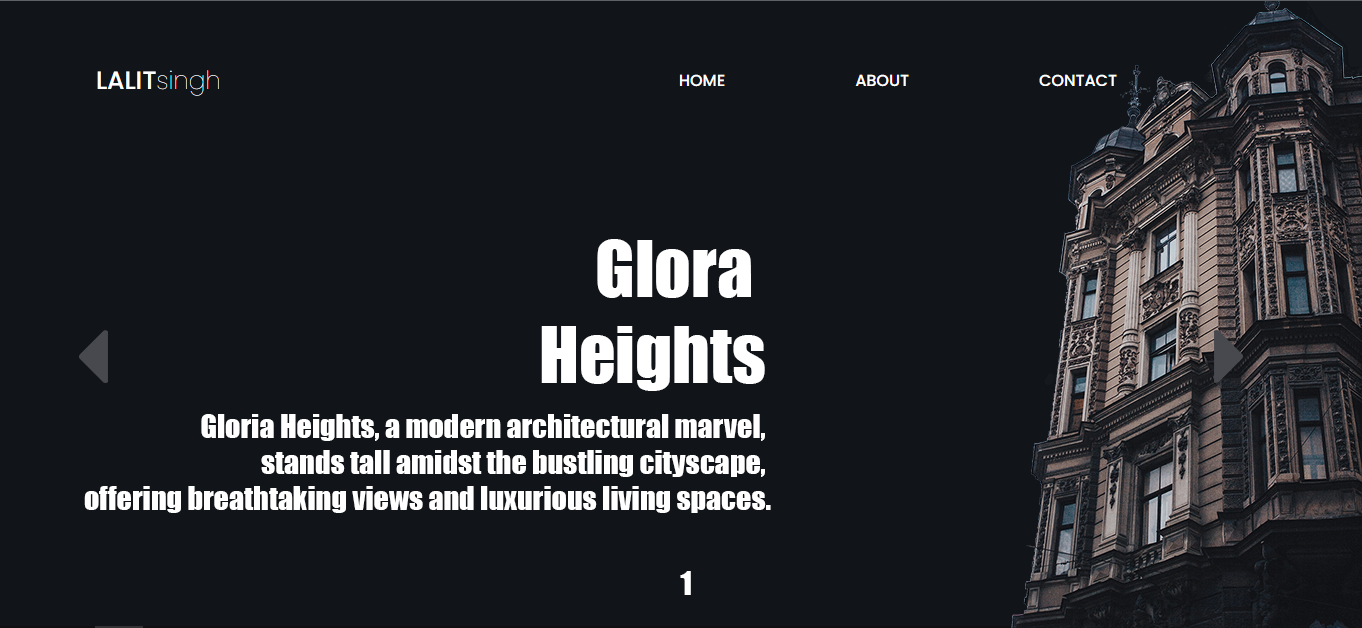
<style>
.page{position:relative;width:1362px;height:628px;background:#11151a}
.page>*{position:absolute;margin:0}
.t1{font:72px "Impact";color:#ffffff}
.t2{font:30px "Impact";color:#ffffff}
</style>
<div class="page">
<p class="t1" style="left:541px;top:239px;width:224px;height:152px;text-align:right">Glora <br>Heights</p>
<p class="t2" style="left:84px;top:414px;width:687px;height:99px;text-align:right">Gloria Heights, a modern architectural marvel, <br>stands tall amidst the bustling cityscape, <br>offering breathtaking views and luxurious living spaces.</p>
<p class="t2" style="left:680px;top:571px;width:11px;height:24px">1</p>
</div>
